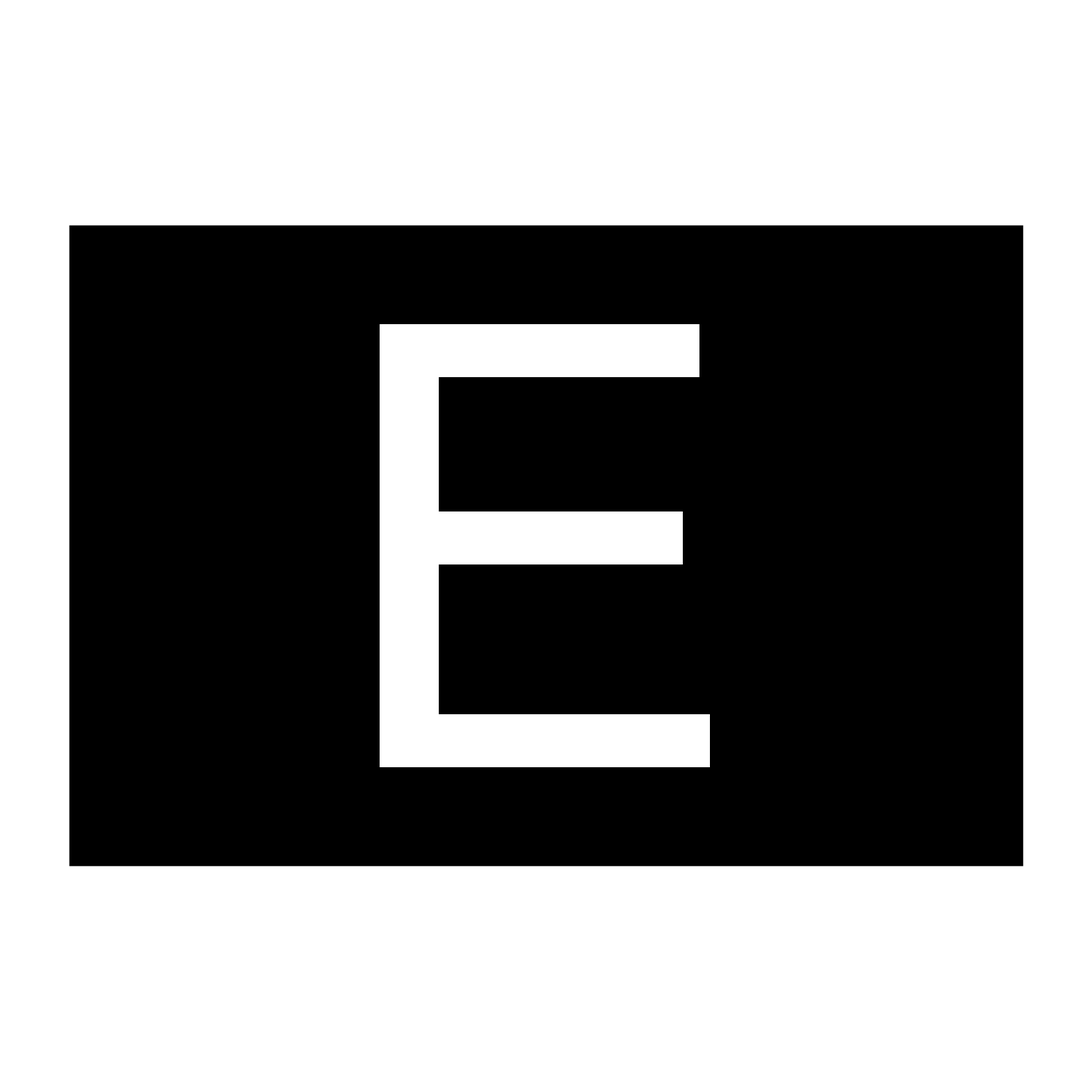
<style>
.page{position:relative;width:1092px;height:1092px;background:#ffffff}
.page>*{position:absolute;margin:0}
.t1{font:617.7px "ArialMT";letter-spacing:0.16em;color:#ffffff}
</style>
<div class="page">
<p class="t1" style="left:380px;top:324px;width:330px;height:443px">E</p>
</div>
